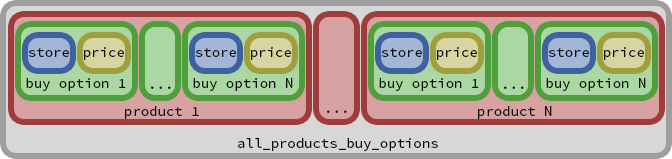
<style>
.page{position:relative;width:672px;height:159px}
.page>*{position:absolute;margin:0}
.t1{font:14px "SourceCodePro-Regular";color:#0a0a09}
</style>
<div class="page">
<p class="t1" style="left:28px;top:48px;width:41px;height:9px">store</p>
<p class="t1" style="left:84px;top:47px;width:40px;height:13px">price</p>
<p class="t1" style="left:195px;top:48px;width:41px;height:9px">store</p>
<p class="t1" style="left:251px;top:47px;width:40px;height:13px">price</p>
<p class="t1" style="left:381px;top:48px;width:41px;height:9px">store</p>
<p class="t1" style="left:437px;top:47px;width:40px;height:13px">price</p>
<p class="t1" style="left:548px;top:48px;width:41px;height:9px">store</p>
<p class="t1" style="left:604px;top:47px;width:40px;height:13px">price</p>
<p class="t1" style="left:26px;top:78px;width:100px;height:13px">buy option 1</p>
<p class="t1" style="left:193px;top:78px;width:100px;height:13px">buy option N</p>
<p class="t1" style="left:379px;top:78px;width:100px;height:13px">buy option 1</p>
<p class="t1" style="left:546px;top:78px;width:100px;height:13px">buy option N</p>
<p class="t1" style="left:151px;top:86px;width:20px;height:3px">...</p>
<p class="t1" style="left:504px;top:86px;width:20px;height:3px">...</p>
<p class="t1" style="left:125px;top:106px;width:74px;height:13px">product 1</p>
<p class="t1" style="left:327px;top:110px;width:20px;height:3px">...</p>
<p class="t1" style="left:478px;top:106px;width:74px;height:13px">product N</p>
<p class="t1" style="left:238px;top:138px;width:200px;height:13px">all_products_buy_options</p>
</div>
